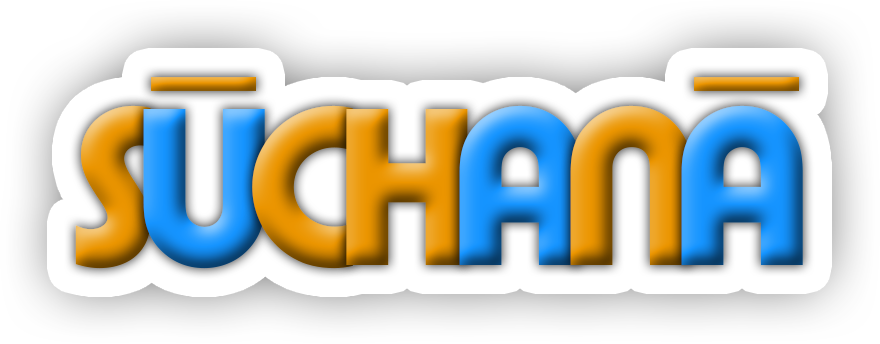
<style>
.page{position:relative;width:880px;height:344px;background:#ffffff}
.page>*{position:absolute;margin:0}
.t1{font:234px "PumpDemiBoldLetPlain"}
</style>
<div class="page">
<p class="t1" style="left:75px;top:105px;width:76px;height:164px">S</p>
<p class="t1" style="left:143px;top:109px;width:122px;height:160px">U</p>
<p class="t1" style="left:252px;top:105px;width:101px;height:164px">C</p>
<p class="t1" style="left:346px;top:109px;width:122px;height:156px">H</p>
<p class="t1" style="left:459px;top:105px;width:122px;height:160px">A</p>
<p class="t1" style="left:570px;top:105px;width:122px;height:160px">N</p>
<p class="t1" style="left:681px;top:105px;width:122px;height:160px">A</p>
</div>
